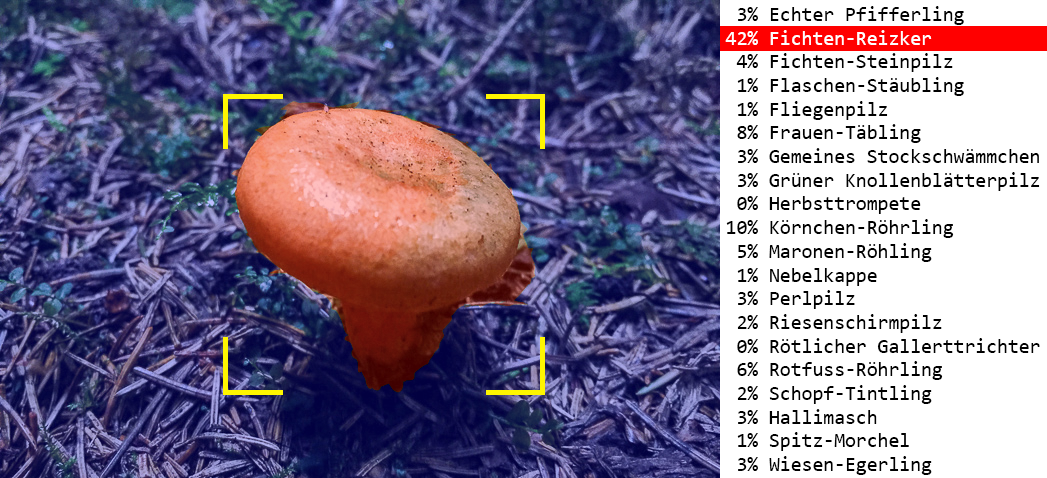
<style>
.page{position:relative;width:1047px;height:478px;background:#ffffff}
.page>*{position:absolute;margin:0}
.t1{font:19.7px "Consolas";color:#000000}
.t2{font:19.7px "Consolas";color:#fefefe}
</style>
<div class="page">
<p class="t1" style="left:725px;top:6px;width:315px;height:469px">3% Echter Pfifferling<br><span class="t2">42% Fichten-Reizker<br></span> 4% Fichten-Steinpilz<br> 1% Flaschen-Stäubling<br> 1% Fliegenpilz<br> 8% Frauen-Täbling<br> 3% Gemeines Stockschwämmchen<br> 3% Grüner Knollenblätterpilz<br> 0% Herbsttrompete<br>10% Körnchen-Röhrling<br> 5% Maronen-Röhling<br> 1% Nebelkappe<br> 3% Perlpilz<br> 2% Riesenschirmpilz<br> 0% Rötlicher Gallerttrichter<br> 6% Rotfuss-Röhrling<br> 2% Schopf-Tintling<br> 3% Hallimasch<br> 1% Spitz-Morchel<br> 3% Wiesen-Egerling</p>
</div>
